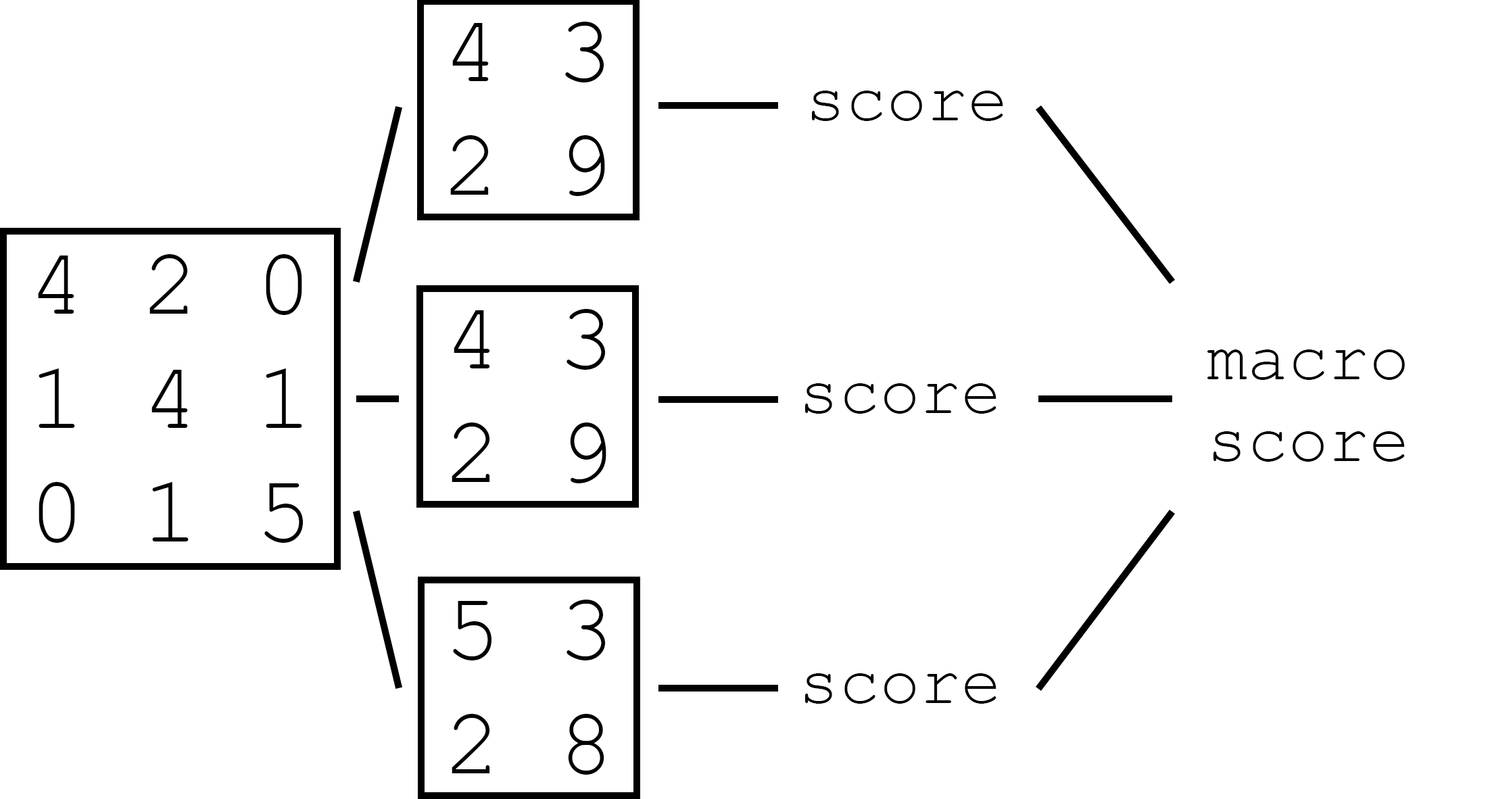
<style>
.page{position:relative;width:1492px;height:799px;background:#ffffff}
.page>*{position:absolute;margin:0}
.t1{font:95px "CourierNewPSMT";color:#000000}
.t2{font:67.8px "CourierNewPSMT";color:#000000}
</style>
<div class="page">
<p class="t1" style="left:450px;top:22px;width:155px;height:174px">4 3<br>2 9</p>
<p class="t2" style="left:812px;top:91px;width:191px;height:30px">score</p>
<p class="t1" style="left:38px;top:254px;width:266px;height:289px">4 2 0<br>1 4 1<br>0 1 5</p>
<p class="t1" style="left:452px;top:309px;width:154px;height:174px">4 3<br>2 9</p>
<p class="t2" style="left:1208px;top:350px;width:197px;height:112px">macro<br>score</p>
<p class="t2" style="left:805px;top:383px;width:192px;height:31px">score</p>
<p class="t1" style="left:452px;top:600px;width:154px;height:175px">5 3<br>2 8</p>
<p class="t2" style="left:805px;top:673px;width:192px;height:31px">score</p>
</div>
